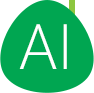
<style>
.page{position:relative;width:94px;height:93px;background:#00a651}
.page>*{position:absolute;margin:0}
.t1{font:64px "SegoeUI-Light";color:#ffffff}
</style>
<div class="page">
<p class="t1" style="left:19px;top:24px;width:48px;height:45px">AI</p>
</div>
